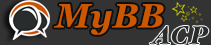
<style>
.page{position:relative;width:211px;height:45px;background:#333333}
.page>*{position:absolute;margin:0}
.t1{font:33.8px "Georgia-BoldItalic";color:#cd5700}
</style>
<div class="page">
<p class="t1" style="left:53px;top:4px;width:111px;height:31px">MyBB</p>
</div>
